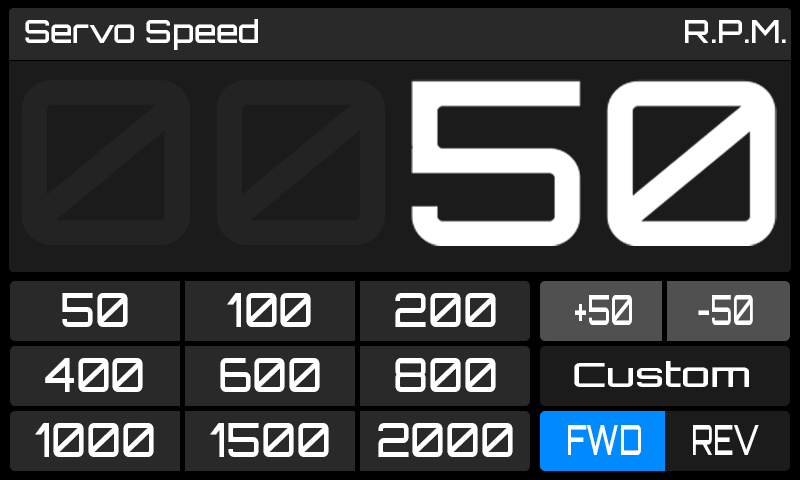
<style>
.page{position:relative;width:800px;height:480px;background:#1b1b1b}
.page>*{position:absolute;margin:0}
.t1{font:31.7px "Orbitron-Medium";color:#ffffff}
.t2{font:228.5px "Orbitron-Medium"}
.t3{font:47.2px "Orbitron-Medium";color:#ffffff;scale:0.88 1}
.t4{font:41.7px "Orbitron-Medium";color:#ffffff;scale:0.67 1}
.t5{font:41.7px "Orbitron-Medium";color:#ffffff;scale:0.63 1}
.t6{font:33.3px "Orbitron-Medium";color:#ffffff;scale:1.26 1}
</style>
<div class="page">
<p class="t1" style="left:25px;top:19px;width:233px;height:31px">Servo Speed</p>
<p class="t1" style="left:685px;top:20px;width:101px;height:23px">R.P.M.</p>
<p class="t2" style="left:21px;top:80px;width:755px;height:166px">0000</p>
<p class="t3" style="left:62px;top:293px;width:66px;height:34px">50</p>
<p class="t3" style="left:227px;top:293px;width:84px;height:34px">100</p>
<p class="t3" style="left:395px;top:293px;width:101px;height:34px">200</p>
<p class="t4" style="left:575px;top:295px;width:57px;height:30px">+50</p>
<p class="t5" style="left:698px;top:295px;width:55px;height:30px">-50</p>
<p class="t3" style="left:45px;top:358px;width:98px;height:34px">400</p>
<p class="t3" style="left:220px;top:358px;width:100px;height:34px">600</p>
<p class="t3" style="left:395px;top:358px;width:101px;height:34px">800</p>
<p class="t6" style="left:574px;top:361px;width:175px;height:26px">Custom</p>
<p class="t3" style="left:35px;top:423px;width:119px;height:34px">1000</p>
<p class="t3" style="left:210px;top:423px;width:119px;height:34px">1500</p>
<p class="t3" style="left:378px;top:423px;width:135px;height:34px">2000</p>
<p class="t4" style="left:568px;top:425px;width:73px;height:30px">FWD</p>
<p class="t5" style="left:693px;top:425px;width:66px;height:30px">REV</p>
</div>
